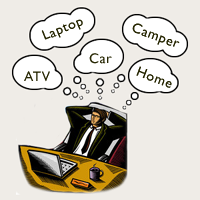
<style>
.page{position:relative;width:200px;height:200px;background:#efece7}
.page>*{position:absolute;margin:0}
.t1{font:14px "GillSansMT";letter-spacing:0.05em;color:#282804}
</style>
<div class="page">
<p class="t1" style="left:41px;top:19px;width:42px;height:21px;rotate:-22deg">Laptop</p>
<p class="t1" style="left:132px;top:23px;width:48px;height:24px;rotate:20deg">Camper</p>
<p class="t1" style="left:89px;top:53px;width:23px;height:11px">Car</p>
<p class="t1" style="left:24px;top:71px;width:26px;height:11px">ATV</p>
<p class="t1" style="left:136px;top:66px;width:36px;height:22px;rotate:21deg">Home</p>
</div>
